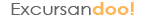
<style>
.page{position:relative;width:148px;height:19px;background:#ffffff}
.page>*{position:absolute;margin:0}
.t1{font:17.2px "CenturyGothic";color:#626262;scale:1.12 1}
.t2{font:17.2px "CenturyGothic-Bold";color:#ffb554;scale:1.12 1}
</style>
<div class="page">
<p class="t1" style="left:11px;top:2px;width:123px;height:13px">Excursan<span class="t2">doo!</span></p>
</div>
